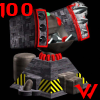
<style>
.page{position:relative;width:100px;height:100px;background:#010101}
.page>*{position:absolute;margin:0}
.t1{font:18.7px "StarcraftNormal";color:#fe0000}
</style>
<div class="page">
<p class="t1" style="left:0px;top:3px;width:33px;height:15px">100</p>
<p class="t1" style="left:73px;top:84px;width:25px;height:15px">W</p>
</div>
